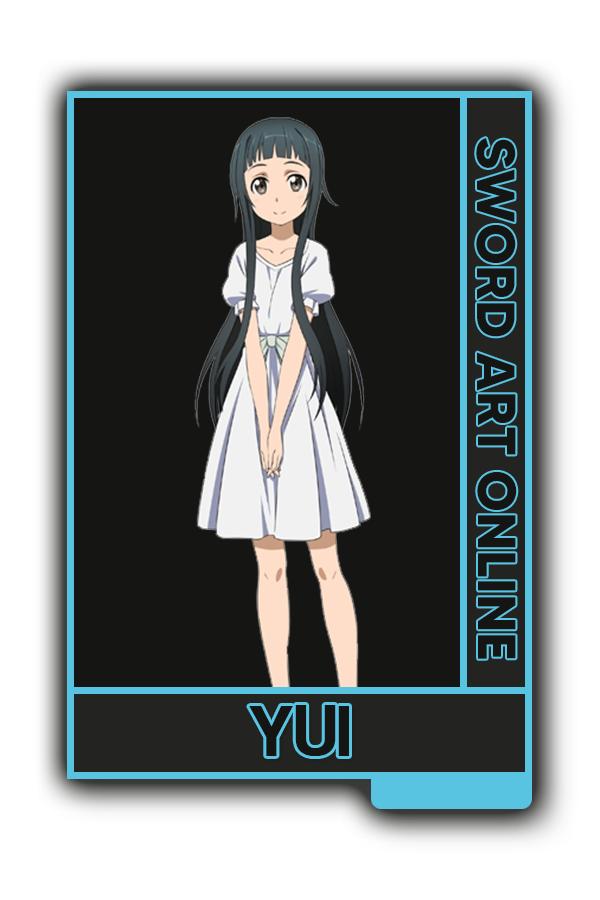
<style>
.page{position:relative;width:600px;height:900px;background:#151514}
.page>*{position:absolute;margin:0}
.t1{font:53.7px "MADETOMMY-Bold";color:#151514}
.t2{font:74.4px "CoolveticaRg-Regular";color:#151514}
</style>
<div class="page">
<p class="t1" style="left:476px;top:138px;width:41px;height:521px;rotate:90deg">SWORD ART ONLINE</p>
<p class="t2" style="left:249px;top:705px;width:100px;height:51px">YUI</p>
</div>
